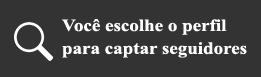
<style>
.page{position:relative;width:261px;height:77px;background:#333333}
.page>*{position:absolute;margin:0}
.t1{font:17.1px "TimesNewRomanPS-BoldMT";color:#ffffff;scale:1.11 1}
</style>
<div class="page">
<p class="t1" style="left:62px;top:19px;width:185px;height:39px">Você escolhe o perfil<br>para captar seguidores</p>
</div>
